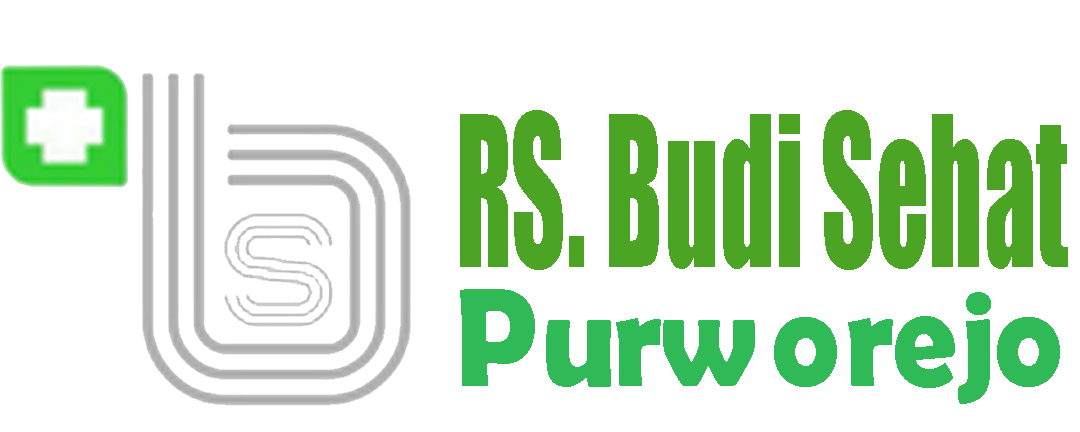
<style>
.page{position:relative;width:1080px;height:432px;background:#ffffff}
.page>*{position:absolute;margin:0}
.t1{font:194.1px "Impact";color:#4ca425;scale:0.54 1}
.t2{font:140.5px "BerlinSansFBDemi-Bold";color:#30b957;scale:0.91 1}
</style>
<div class="page">
<p class="t1" style="left:460px;top:110px;width:608px;height:160px">RS. Budi Sehat</p>
<p class="t2" style="left:460px;top:289px;width:600px;height:115px">Purworejo</p>
</div>
